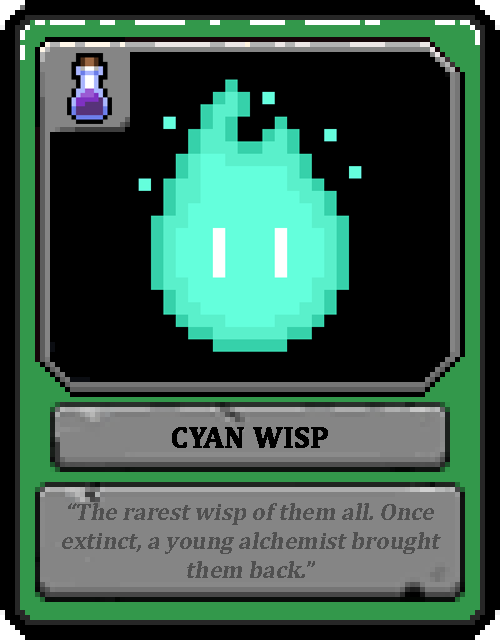
<style>
.page{position:relative;width:500px;height:640px;background:#000000}
.page>*{position:absolute;margin:0}
.t1{font:30px "Cambria-Bold";color:#000000;text-transform:uppercase;font-weight:bold}
.t2{font:24px "Cambria-Bold";color:#505050;font-style:italic}
</style>
<div class="page">
<p class="t1" style="left:172px;top:427px;width:156px;height:21px">Cyan Wisp</p>
<p class="t2" style="left:62px;top:503px;width:379px;height:75px;text-align:center">“The rarest wisp of them all. Once extinct, a young alchemist brought them back.”</p>
</div>
